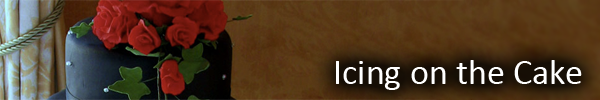
<style>
.page{position:relative;width:600px;height:100px}
.page>*{position:absolute;margin:0}
.t1{font:36px "Calibri";color:#ffffff}
</style>
<div class="page">
<p class="t1" style="left:336px;top:60px;width:246px;height:30px">Icing on the Cake</p>
</div>
